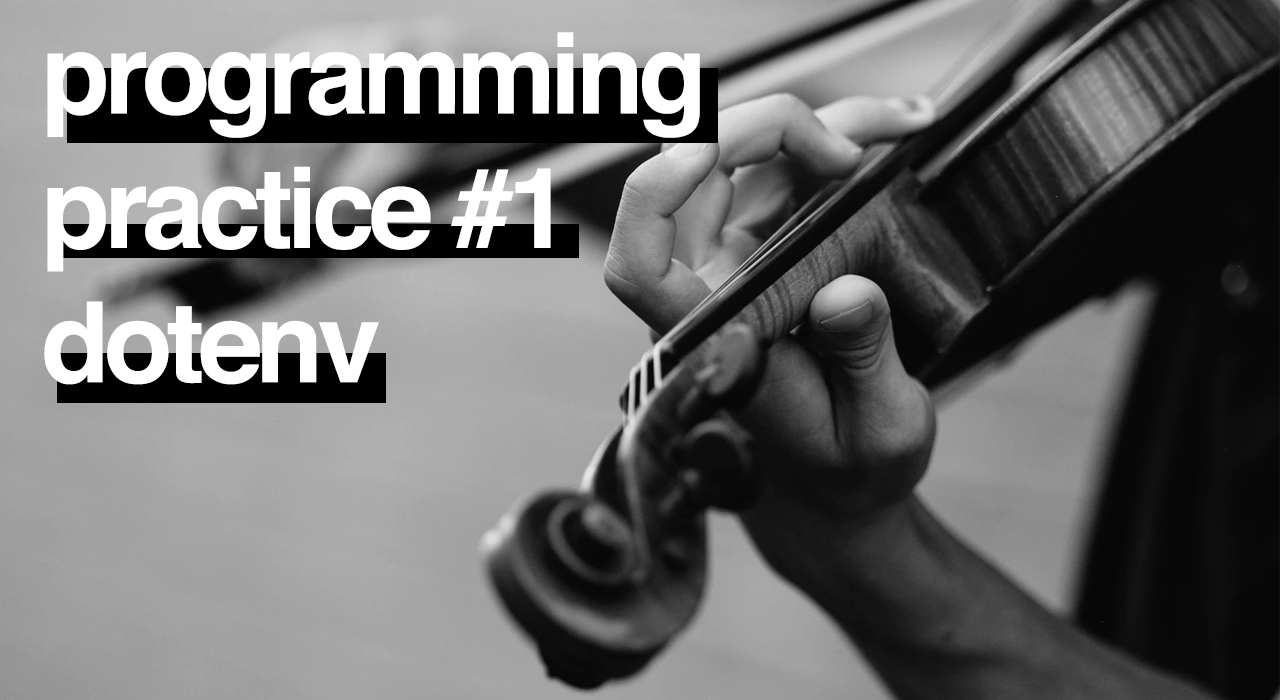
<style>
.page{position:relative;width:1280px;height:700px}
.page>*{position:absolute;margin:0}
.t1{font:112px "Helvetica-Bold";letter-spacing:-0.05em;color:#ffffff}
</style>
<div class="page">
<p class="t1" style="left:44px;top:32px;width:656px;height:353px">programming<br>practice #1<br>dotenv</p>
</div>
